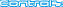
<style>
.page{position:relative;width:63px;height:7px;background:#ffffff}
.page>*{position:absolute;margin:0}
.t1{font:10px "ThundergodII";color:#ffffff}
</style>
<div class="page">
<p class="t1" style="left:0px;top:0px;width:63px;height:7px">Controls:</p>
</div>
